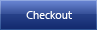
<style>
.page{position:relative;width:97px;height:30px}
.page>*{position:absolute;margin:0}
.t1{font:11px "SegoeUI";color:#ffffff}
</style>
<div class="page">
<p class="t1" style="left:26px;top:11px;width:46px;height:8px">Checkout</p>
</div>
